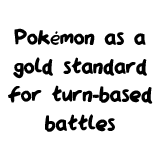
<style>
.page{position:relative;width:160px;height:160px;background:#ffffff}
.page>*{position:absolute;margin:0}
.t1{font:23.9px "QAReports";color:#000000}
</style>
<div class="page">
<p class="t1" style="left:8px;top:28px;width:145px;height:104px;text-align:center">Pokémon as a<br>gold standard<br>for turn-based<br>battles</p>
</div>
